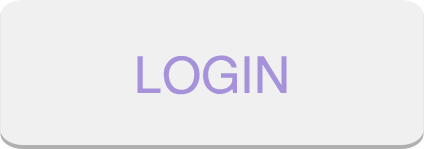
<style>
.page{position:relative;width:424px;height:149px;background:#f0f0f0}
.page>*{position:absolute;margin:0}
.t1{font:50px "Helvetica-Normal";color:#a592db}
</style>
<div class="page">
<p class="t1" style="left:137px;top:55px;width:150px;height:40px">LOGIN</p>
</div>
